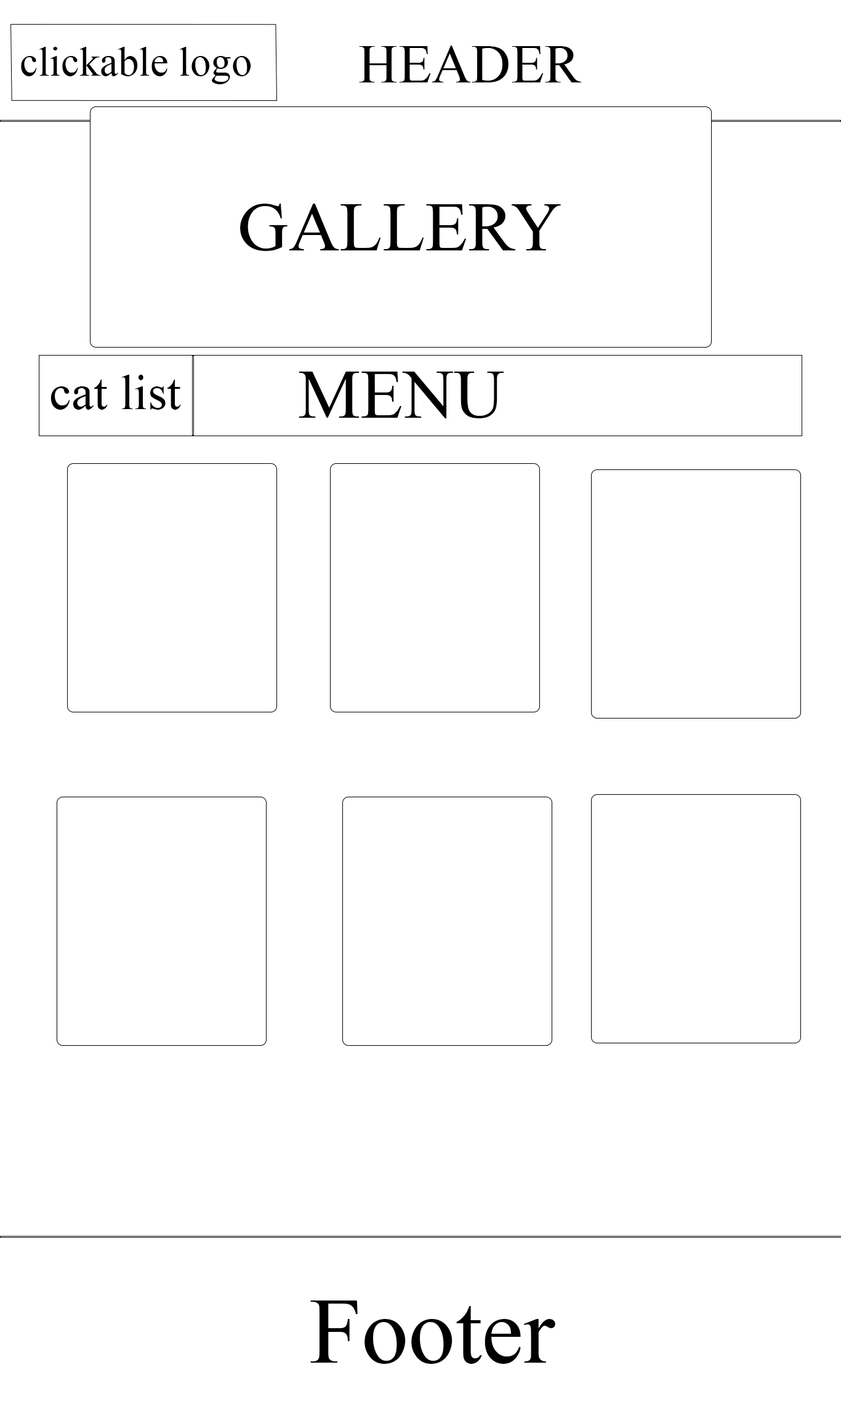
<style>
.page{position:relative;width:841px;height:1418px;background:#ffffff}
.page>*{position:absolute;margin:0}
.t1{font:41.2px "TimesNewRomanPSMT";color:#000000}
.t2{font:54.8px "TimesNewRomanPSMT";color:#000000}
.t3{font:70.2px "TimesNewRomanPSMT";color:#000000}
.t4{font:49.8px "TimesNewRomanPSMT";color:#000000}
.t5{font:94.2px "TimesNewRomanPSMT";color:#000000}
</style>
<div class="page">
<p class="t1" style="left:21px;top:47px;width:230px;height:37px">clickable logo</p>
<p class="t2" style="left:359px;top:46px;width:223px;height:36px">HEADER</p>
<p class="t3" style="left:240px;top:204px;width:321px;height:47px">GALLERY</p>
<p class="t4" style="left:50px;top:375px;width:131px;height:35px">cat list</p>
<p class="t3" style="left:298px;top:372px;width:205px;height:47px">MENU</p>
<p class="t5" style="left:310px;top:1301px;width:245px;height:63px">Footer</p>
</div>
